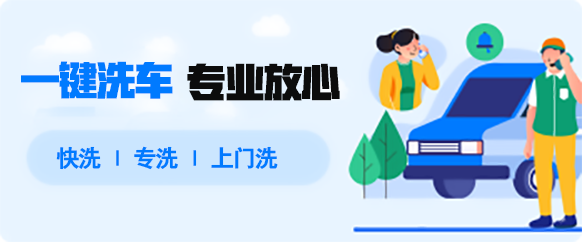
<style>
.page{position:relative;width:582px;height:242px;background:#e8f4ff}
.page>*{position:absolute;margin:0}
.t1{font:40.1px "HYLiLiangHeiJ";letter-spacing:-0.05em;color:#007aff;text-transform:uppercase}
.t2{font:40.1px "HYLiLiangHeiJ";letter-spacing:-0.05em;color:#0c0c0c;text-transform:uppercase}
.t3{font:23.4px "STJTBZ";letter-spacing:-0.05em;color:#007aff;text-transform:uppercase}
</style>
<div class="page">
<p class="t1" style="left:21px;top:61px;width:152px;height:38px">一键洗车</p>
<p class="t2" style="left:187px;top:63px;width:153px;height:38px">专业放心</p>
<p class="t3" style="left:56px;top:146px;width:222px;height:24px">快洗 ｜ 专洗 ｜ 上门洗</p>
</div>
